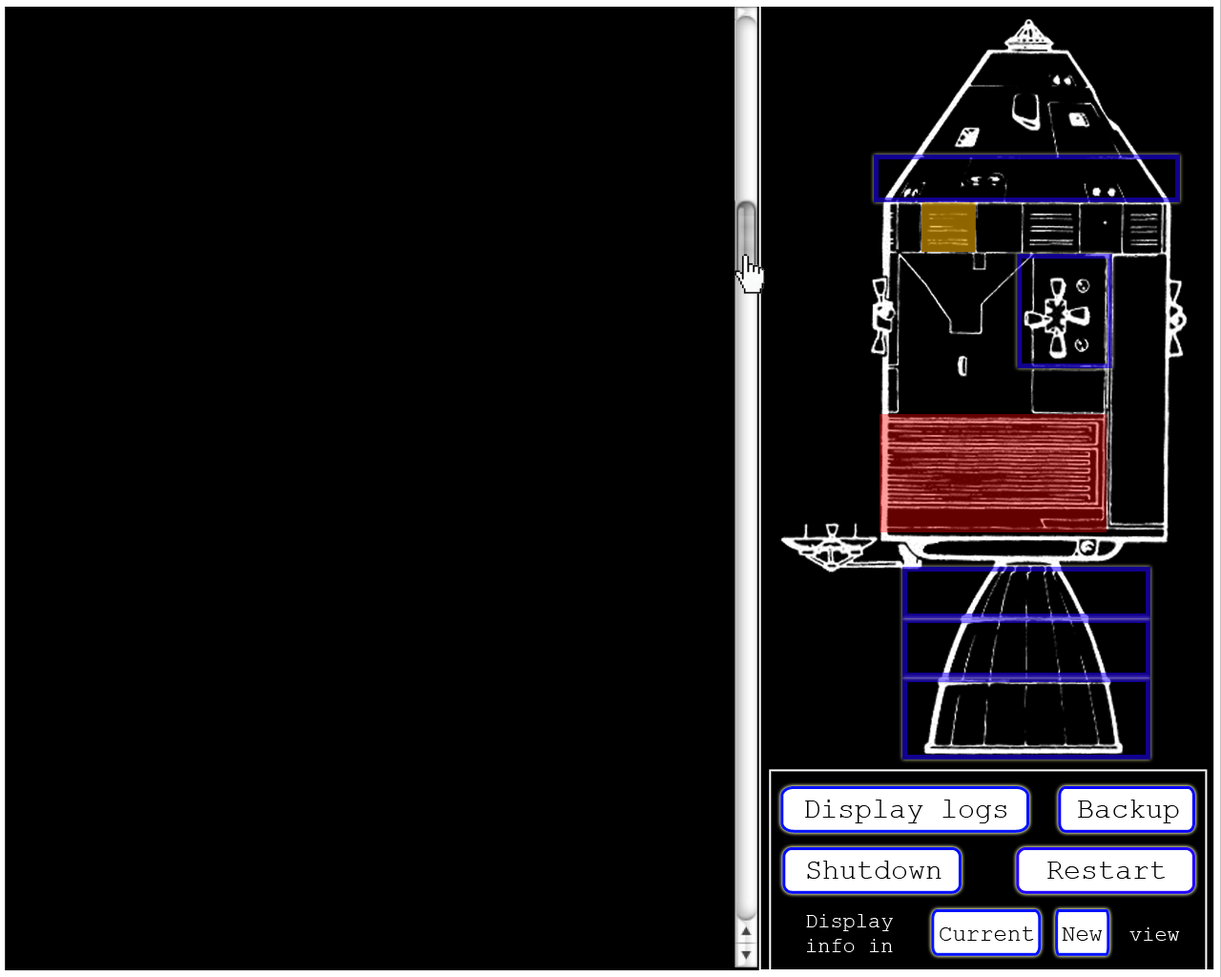
<style>
.page{position:relative;width:1221px;height:977px;background:#000000}
.page>*{position:absolute;margin:0}
.t1{font:28.6px "CourierNewPSMT";color:#000000}
.t2{font:21px "CourierNewPSMT";color:#ffffff}
.t3{font:22.9px "CourierNewPSMT";color:#000000}
</style>
<div class="page">
<p class="t1" style="left:805px;top:799px;width:201px;height:24px">Display logs</p>
<p class="t1" style="left:1078px;top:799px;width:101px;height:24px">Backup</p>
<p class="t1" style="left:807px;top:860px;width:134px;height:18px">Shutdown</p>
<p class="t1" style="left:1047px;top:861px;width:118px;height:17px">Restart</p>
<p class="t2" style="left:806px;top:914px;width:87px;height:38px">Display <br>info in</p>
<p class="t3" style="left:940px;top:926px;width:94px;height:14px">Current</p>
<p class="t3" style="left:1062px;top:927px;width:41px;height:13px">New</p>
<p class="t2" style="left:1129px;top:927px;width:51px;height:13px">view</p>
</div>
